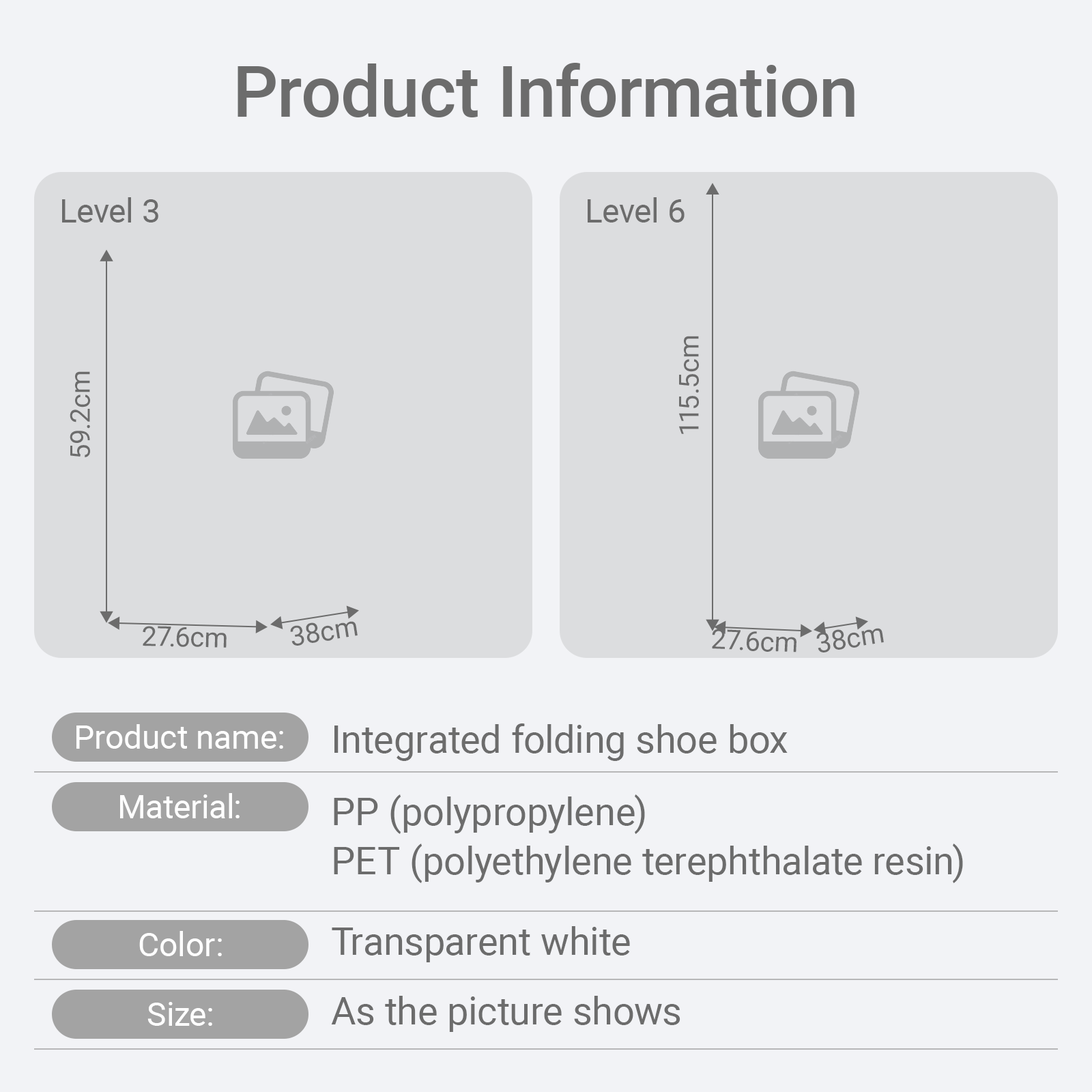
<style>
.page{position:relative;width:1092px;height:1092px;background:#f2f3f6}
.page>*{position:absolute;margin:0}
.t1{font:71px "Roboto-Medium";color:#6c6c6c}
.t2{font:32.8px "Roboto-Regular";color:#6c6c6c}
.t3{font:27.3px "Roboto-Regular";color:#6c6c6c}
.t4{font:32.8px "Roboto-Regular";color:#ffffff}
.t5{font:38.2px "Roboto-Regular";color:#6c6c6c}
.t6{font:38.2px/49.1px "Roboto-Regular";color:#6c6c6c}
</style>
<div class="page">
<p class="t1" style="left:238px;top:63px;width:616px;height:54px">Product Information</p>
<p class="t2" style="left:62px;top:197px;width:96px;height:25px">Level 3</p>
<p class="t2" style="left:588px;top:197px;width:97px;height:25px">Level 6</p>
<p class="t3" style="left:679px;top:336px;width:20px;height:98px;rotate:-90deg">115.5cm</p>
<p class="t3" style="left:70px;top:371px;width:20px;height:86px;rotate:-90deg">59.2cm</p>
<p class="t3" style="left:143px;top:626px;width:84px;height:22px;rotate:1deg">27.6cm</p>
<p class="t3" style="left:290px;top:621px;width:68px;height:25px;rotate:-9deg">38cm</p>
<p class="t3" style="left:712px;top:629px;width:84px;height:23px;rotate:2deg">27.6cm</p>
<p class="t3" style="left:816px;top:628px;width:68px;height:24px;rotate:-9deg">38cm</p>
<p class="t4" style="left:76px;top:724px;width:207px;height:25px">Product name:</p>
<p class="t5" style="left:334px;top:723px;width:454px;height:38px">Integrated folding shoe box</p>
<p class="t4" style="left:120px;top:793px;width:120px;height:25px">Material:</p>
<p class="t6" style="left:334px;top:794px;width:629px;height:89px">PP (polypropylene)<br>PET (polyethylene terephthalate resin)</p>
<p class="t5" style="left:332px;top:926px;width:298px;height:36px">Transparent white</p>
<p class="t4" style="left:139px;top:931px;width:83px;height:25px">Color:</p>
<p class="t4" style="left:147px;top:1002px;width:65px;height:24px">Size:</p>
<p class="t5" style="left:331px;top:996px;width:349px;height:36px">As the picture shows</p>
</div>
